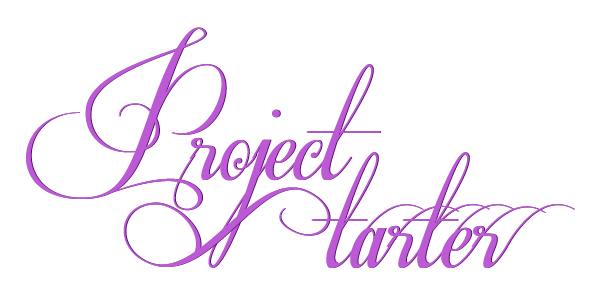
<style>
.page{position:relative;width:600px;height:300px;background:#ffffff}
.page>*{position:absolute;margin:0}
.t1{font:142.8px "Respective";letter-spacing:-0.01em;color:#bc59d5}
.t2{font:142.8px "RespectiveSwashes";letter-spacing:-0.01em;color:#bc59d5}
</style>
<div class="page">
<p class="t1" style="left:26px;top:27px;width:354px;height:241px">Project</p>
<p class="t2" style="left:123px;top:152px;width:451px;height:116px">Starter</p>
</div>
